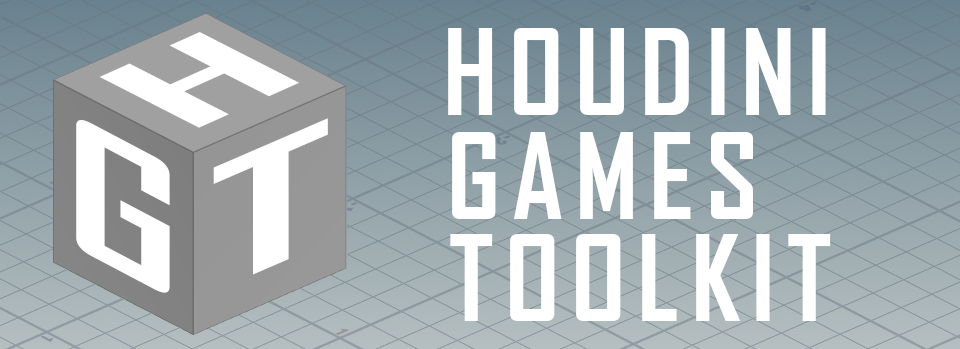
<style>
.page{position:relative;width:960px;height:349px}
.page>*{position:absolute;margin:0}
.t1{font:114.4px "AgencyFB-Bold";letter-spacing:0.1em;color:#ffffff}
.t2{font:145.8px "AgencyFB-Bold";letter-spacing:0.1em;color:#ffffff;scale:1.96 1}
.t3{font:173.6px "AgencyFB-Bold";letter-spacing:0.1em;color:#ffffff;scale:1.6 1}
.t4{font:162.1px "AgencyFB-Bold";letter-spacing:0.1em;color:#ffffff;scale:2.09 1}
</style>
<div class="page">
<p class="t1" style="left:448px;top:28px;width:378px;height:87px">HOUDINI</p>
<p class="t2" style="left:99px;top:32px;width:200px;height:96px;rotate:-24deg">H</p>
<p class="t3" style="left:76px;top:120px;width:94px;height:173px;rotate:28deg">G</p>
<p class="t4" style="left:213px;top:118px;width:115px;height:157px;rotate:-23deg">T</p>
<p class="t1" style="left:452px;top:132px;width:301px;height:87px">GAMES</p>
<p class="t1" style="left:450px;top:234px;width:381px;height:87px">TOOLKIT</p>
</div>
